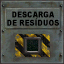
<style>
.page{position:relative;width:64px;height:64px}
.page>*{position:absolute;margin:0}
.t1{font:8.2px/8px "Arial-Black";letter-spacing:-0.02em;color:#000000;text-transform:uppercase;scale:0.83 1}
</style>
<div class="page">
<p class="t1" style="left:7px;top:11px;width:52px;height:15px;text-align:center">descarga<br>de resíduos</p>
</div>
